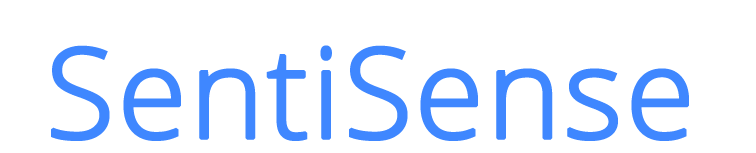
<style>
.page{position:relative;width:756px;height:153px;background:#ffffff}
.page>*{position:absolute;margin:0}
.t1{font:125px "OpenSans-Light";color:#3f87ff;font-weight:bold}
</style>
<div class="page">
<p class="t1" style="left:51px;top:45px;width:638px;height:96px">SentiSense</p>
</div>
